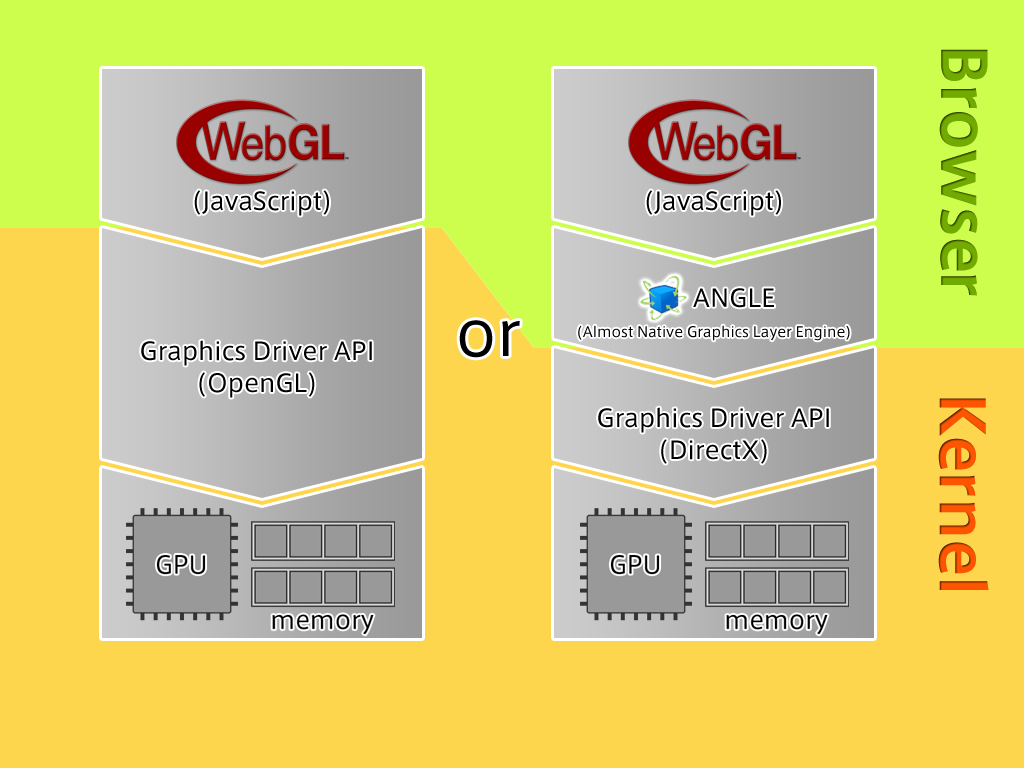
<style>
.page{position:relative;width:1024px;height:768px;background:#fed64d}
.page>*{position:absolute;margin:0}
.t1{font:60px "AxisStd-Bold";color:#71ab00}
.t2{font:24px "AxisStd-Regular";color:#000000}
.t3{font:60px "AxisStd-Regular";color:#000000}
.t4{font:14px "AxisStd-Regular";color:#000000}
.t5{font:24px/32px "AxisStd-Regular";color:#000000}
.t6{font:60px "AxisStd-Bold";color:#ff5400}
</style>
<div class="page">
<p class="t1" style="left:939px;top:49px;width:49px;height:247px;rotate:90deg">Browser</p>
<p class="t2" style="left:194px;top:190px;width:135px;height:26px">(JavaScript)</p>
<p class="t2" style="left:646px;top:190px;width:135px;height:26px">(JavaScript)</p>
<p class="t2" style="left:693px;top:288px;width:81px;height:20px">ANGLE</p>
<p class="t3" style="left:459px;top:320px;width:61px;height:38px">or</p>
<p class="t4" style="left:578px;top:325px;width:272px;height:16px">(Almost Native Graphics Layer Engine)</p>
<p class="t5" style="left:141px;top:340px;width:231px;height:58px;text-align:center">Graphics Driver API<br>(OpenGL)</p>
<p class="t6" style="left:938px;top:398px;width:51px;height:192px;rotate:90deg">Kernel</p>
<p class="t5" style="left:598px;top:407px;width:231px;height:57px;text-align:center">Graphics Driver API<br>(DirectX)</p>
</div>
